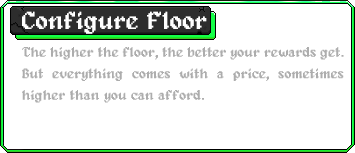
<style>
.page{position:relative;width:355px;height:153px;background:#ffffff}
.page>*{position:absolute;margin:0}
.t1{font:25px "Alagard";color:#ffffff}
.t2{font:14px/21.5px "Alagard";color:#adadad}
</style>
<div class="page">
<p class="t1" style="left:22px;top:11px;width:185px;height:23px">Configure Floor</p>
<p class="t2" style="left:22px;top:47px;width:322px;height:56px;text-align:justify">The higher the floor, the better your rewards get. But everything comes with a price, sometimes higher than you can afford.</p>
</div>
